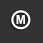
<style>
.page{position:relative;width:43px;height:43px;background:#333333}
.page>*{position:absolute;margin:0}
.t1{font:12.2px "Arial-BoldMT";color:#ffffff;text-transform:uppercase}
</style>
<div class="page">
<p class="t1" style="left:16px;top:15px;width:9px;height:9px">M</p>
<p class="t1" style="left:16px;top:15px;width:9px;height:9px;opacity:0.2">M</p>
</div>
